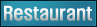
<style>
.page{position:relative;width:97px;height:27px}
.page>*{position:absolute;margin:0}
.t1{font:17px "H2hdrM"}
</style>
<div class="page">
<p class="t1" style="left:4px;top:5px;width:88px;height:16px">Restaurant Info.</p>
</div>
